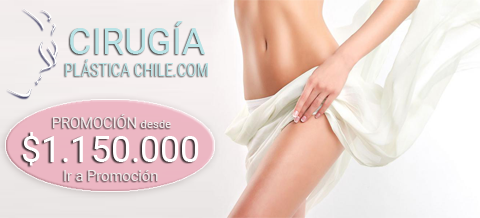
<style>
.page{position:relative;width:480px;height:218px}
.page>*{position:absolute;margin:0}
.t1{font:18px "Roboto-Regular";color:#b9e3e6;scale:0.8 1}
.t2{font:36px "Roboto-Regular";color:#b9e3e6}
.t3{font:14.6px "Roboto-Regular";color:#f0eaea}
.t4{font:11.4px "Roboto-Regular";color:#f0eaea}
.t5{font:35.8px "Roboto-Regular";color:#ffffff}
</style>
<div class="page">
<p class="t1" style="left:65px;top:21px;width:143px;height:55px;text-align:center"><span class="t2">CIRUGÍA<br></span>PLÁSTICA CHILE.COM</p>
<p class="t3" style="left:52px;top:114px;width:119px;height:14px">PROMOCIÓN <span class="t4">desde</span></p>
<p class="t5" style="left:22px;top:132px;width:177px;height:34px">$1.150.000</p>
<p class="t3" style="left:64px;top:170px;width:94px;height:11px">Ir a Promoción</p>
</div>
